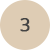
<style>
.page{position:relative;width:50px;height:50px;background:#deccb4}
.page>*{position:absolute;margin:0}
.t1{font:18px "OpenSans";color:#444444;font-weight:bold}
</style>
<div class="page">
<p class="t1" style="left:20px;top:18px;width:10px;height:14px">3</p>
</div>
